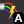
<style>
.page{position:relative;width:24px;height:24px;background:#333333}
.page>*{position:absolute;margin:0}
.t1{font:11px "Arial-BoldMT";color:#ffffff}
</style>
<div class="page">
<p class="t1" style="left:14px;top:14px;width:9px;height:8px">A</p>
</div>
